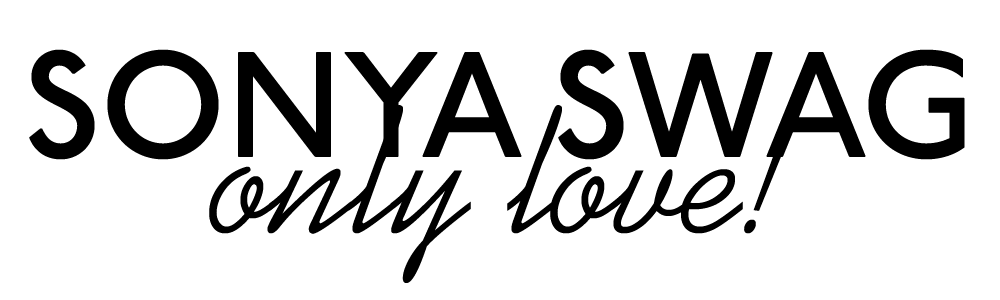
<style>
.page{position:relative;width:1000px;height:300px;background:#ffffff}
.page>*{position:absolute;margin:0}
.t1{font:150px "P22UndergroundCYPro-Medium";color:#000000;text-transform:uppercase}
.t2{font:175px "KaufmannBT-Regular";color:#000000}
</style>
<div class="page">
<p class="t1" style="left:29px;top:49px;width:936px;height:111px">sonya swag</p>
<p class="t2" style="left:209px;top:105px;width:582px;height:178px">only love!</p>
</div>
